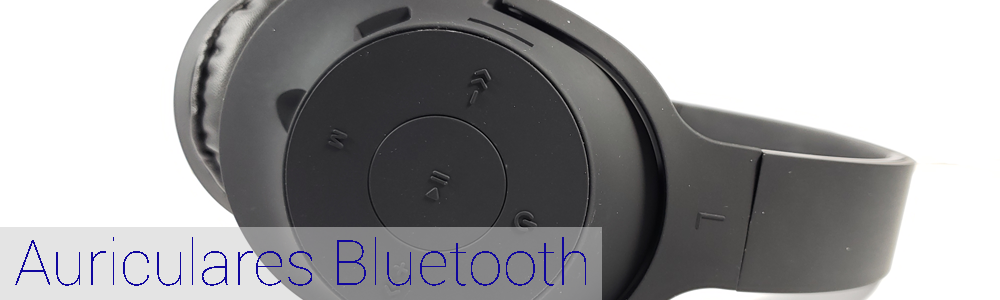
<style>
.page{position:relative;width:1000px;height:300px;background:#ffffff}
.page>*{position:absolute;margin:0}
.t1{font:63px "Roboto-Thin";color:#10069f}
</style>
<div class="page">
<p class="t1" style="left:15px;top:237px;width:571px;height:49px">Auriculares Bluetooth</p>
</div>
